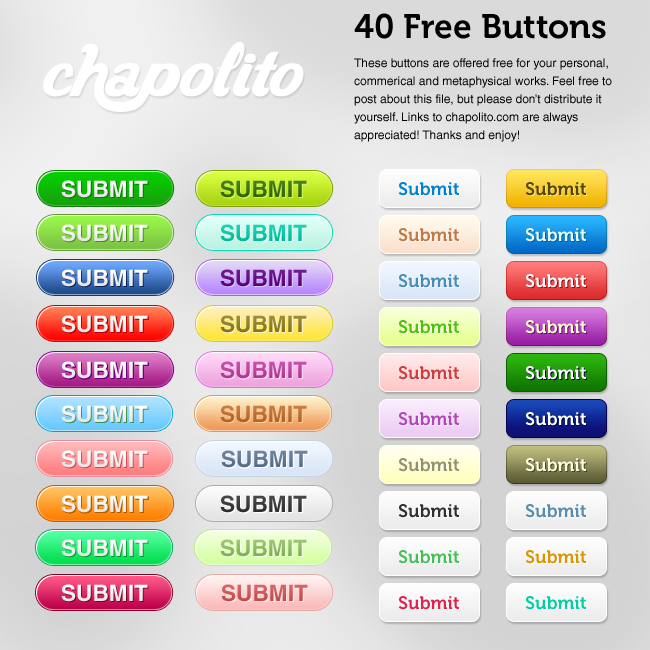
<style>
.page{position:relative;width:650px;height:650px}
.page>*{position:absolute;margin:0}
.t1{font:33.7px "Museo-700";color:#000000}
.t2{font:12px/18px "HelveticaLTStd-Roman";color:#000000}
.t3{font:22.6px "HelveticaLTStd-Bold";color:#ffffff}
.t4{font:22.6px "HelveticaLTStd-Bold";color:#337100}
.t5{font:18px "Museo-700";color:#0181d2}
.t6{font:18px "Museo-700";color:#514700}
.t7{font:22.6px "HelveticaLTStd-Bold";color:#00cda8}
.t8{font:18px "Museo-700";color:#c07944}
.t9{font:18px "Museo-700";color:#eafaff}
.t10{font:22.6px "HelveticaLTStd-Bold";color:#610085}
.t11{font:18px "Museo-700";color:#468dba}
.t12{font:18px "Museo-700";color:#ffffff}
.t13{font:22.6px "HelveticaLTStd-Bold";color:#91811d}
.t14{font:18px "Museo-700";color:#4ec110}
.t15{font:18px "Museo-700";color:#feffca}
.t16{font:22.6px "HelveticaLTStd-Bold";color:#be3da1}
.t17{font:18px "Museo-700";color:#cd3f3f}
.t18{font:22.6px "HelveticaLTStd-Bold";color:#c26d2b}
.t19{font:18px "Museo-700";color:#b046ba}
.t20{font:22.6px "HelveticaLTStd-Bold";color:#5d7696}
.t21{font:18px "Museo-700";color:#949366}
.t22{font:18px "Museo-700";color:#ffffe6}
.t23{font:22.6px "HelveticaLTStd-Bold";color:#323232}
.t24{font:18px "Museo-700";color:#2f3133}
.t25{font:18px "Museo-700";color:#598baa}
.t26{font:22.6px "HelveticaLTStd-Bold";color:#8ec161}
.t27{font:18px "Museo-700";color:#44c055}
.t28{font:18px "Museo-700";color:#db9500}
.t29{font:22.6px "HelveticaLTStd-Bold";color:#d35454}
.t30{font:18px "Museo-700";color:#e1224f}
.t31{font:18px "Museo-700";color:#00cda4}
</style>
<div class="page">
<p class="t1" style="left:354px;top:13px;width:252px;height:26px">40 Free Buttons</p>
<p class="t2" style="left:354px;top:58px;width:258px;height:84px">These buttons are offered free for your personal,<br>commerical and metaphysical works. Feel free to <br>post about this file, but please don’t distribute it <br>yourself. Links to chapolito.com are always <br>appreciated! Thanks and enjoy!</p>
<p class="t3" style="left:61px;top:180px;width:87px;height:18px">SUBMIT</p>
<p class="t4" style="left:220px;top:180px;width:87px;height:18px">SUBMIT</p>
<p class="t5" style="left:398px;top:182px;width:61px;height:14px">Submit</p>
<p class="t6" style="left:525px;top:182px;width:61px;height:14px">Submit</p>
<p class="t3" style="left:61px;top:224px;width:87px;height:18px">SUBMIT</p>
<p class="t7" style="left:220px;top:224px;width:87px;height:18px">SUBMIT</p>
<p class="t8" style="left:398px;top:228px;width:61px;height:14px">Submit</p>
<p class="t9" style="left:525px;top:228px;width:61px;height:14px">Submit</p>
<p class="t3" style="left:61px;top:269px;width:87px;height:18px">SUBMIT</p>
<p class="t10" style="left:220px;top:269px;width:87px;height:18px">SUBMIT</p>
<p class="t11" style="left:398px;top:274px;width:61px;height:14px">Submit</p>
<p class="t12" style="left:525px;top:274px;width:61px;height:14px">Submit</p>
<p class="t3" style="left:61px;top:315px;width:87px;height:18px">SUBMIT</p>
<p class="t13" style="left:220px;top:315px;width:87px;height:18px">SUBMIT</p>
<p class="t14" style="left:398px;top:320px;width:61px;height:14px">Submit</p>
<p class="t15" style="left:525px;top:320px;width:61px;height:14px">Submit</p>
<p class="t3" style="left:61px;top:361px;width:87px;height:18px">SUBMIT</p>
<p class="t16" style="left:220px;top:361px;width:87px;height:18px">SUBMIT</p>
<p class="t17" style="left:398px;top:366px;width:61px;height:14px">Submit</p>
<p class="t12" style="left:525px;top:366px;width:61px;height:14px">Submit</p>
<p class="t3" style="left:61px;top:405px;width:87px;height:18px">SUBMIT</p>
<p class="t18" style="left:220px;top:405px;width:87px;height:18px">SUBMIT</p>
<p class="t19" style="left:398px;top:412px;width:61px;height:14px">Submit</p>
<p class="t12" style="left:525px;top:412px;width:61px;height:14px">Submit</p>
<p class="t3" style="left:61px;top:450px;width:87px;height:18px">SUBMIT</p>
<p class="t20" style="left:221px;top:450px;width:87px;height:18px">SUBMIT</p>
<p class="t21" style="left:398px;top:458px;width:61px;height:14px">Submit</p>
<p class="t22" style="left:525px;top:458px;width:61px;height:14px">Submit</p>
<p class="t3" style="left:61px;top:495px;width:87px;height:18px">SUBMIT</p>
<p class="t23" style="left:220px;top:495px;width:87px;height:18px">SUBMIT</p>
<p class="t24" style="left:398px;top:504px;width:61px;height:14px">Submit</p>
<p class="t25" style="left:525px;top:504px;width:61px;height:14px">Submit</p>
<p class="t3" style="left:61px;top:539px;width:87px;height:18px">SUBMIT</p>
<p class="t26" style="left:220px;top:539px;width:87px;height:18px">SUBMIT</p>
<p class="t27" style="left:398px;top:550px;width:61px;height:14px">Submit</p>
<p class="t28" style="left:525px;top:550px;width:61px;height:14px">Submit</p>
<p class="t3" style="left:61px;top:584px;width:87px;height:18px">SUBMIT</p>
<p class="t29" style="left:221px;top:584px;width:87px;height:18px">SUBMIT</p>
<p class="t30" style="left:398px;top:596px;width:61px;height:14px">Submit</p>
<p class="t31" style="left:525px;top:596px;width:61px;height:14px">Submit</p>
</div>
